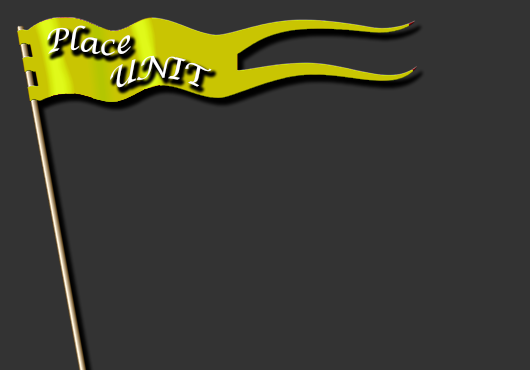
<style>
.page{position:relative;width:530px;height:370px;background:#333333}
.page>*{position:absolute;margin:0}
.t1{font:30px "LucidaCalligraphy-Italic";color:#ffffff}
</style>
<div class="page">
<p class="t1" style="left:47px;top:25px;width:84px;height:31px;rotate:-4deg">Place</p>
<p class="t1" style="left:110px;top:55px;width:102px;height:33px">UNIT</p>
</div>
